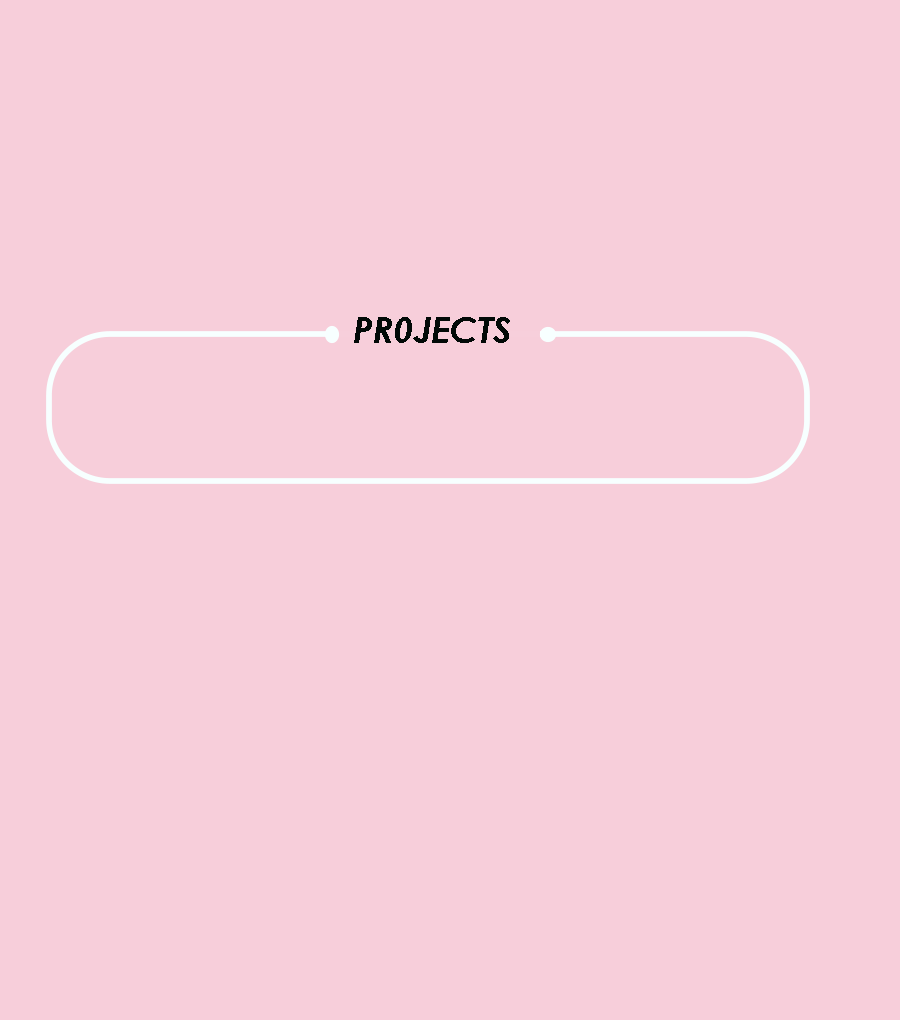
<style>
.page{position:relative;width:900px;height:1020px;background:#f7ceda}
.page>*{position:absolute;margin:0}
.t1{font:36px "CenturyGothic-BoldItalic";color:#020907;text-transform:uppercase}
</style>
<div class="page">
<p class="t1" style="left:354px;top:317px;width:156px;height:26px">pr0jects</p>
</div>
